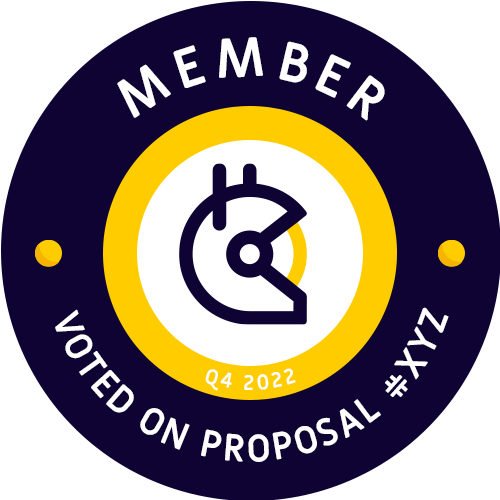
<style>
.page{position:relative;width:500px;height:500px;background:#0e0333}
.page>*{position:absolute;margin:0}
.t1{font:54.2px "MiriamLibre-Bold";color:#ffffff}
.t2{font:37.5px "MiriamLibre-Bold";letter-spacing:0.2em;color:#ffffff}
.t3{font:20.8px "MiriamLibre-Bold";letter-spacing:0.2em;color:#ffffff}
</style>
<div class="page">
<p class="t1" style="left:117px;top:37px;width:268px;height:84px">MEMBER</p>
<p class="t2" style="left:55px;top:307px;width:394px;height:155px;text-align:center">VOTED ON PROPOSAL #XYZ</p>
<p class="t3" style="left:205px;top:368px;width:91px;height:23px">Q4 2022</p>
</div>
